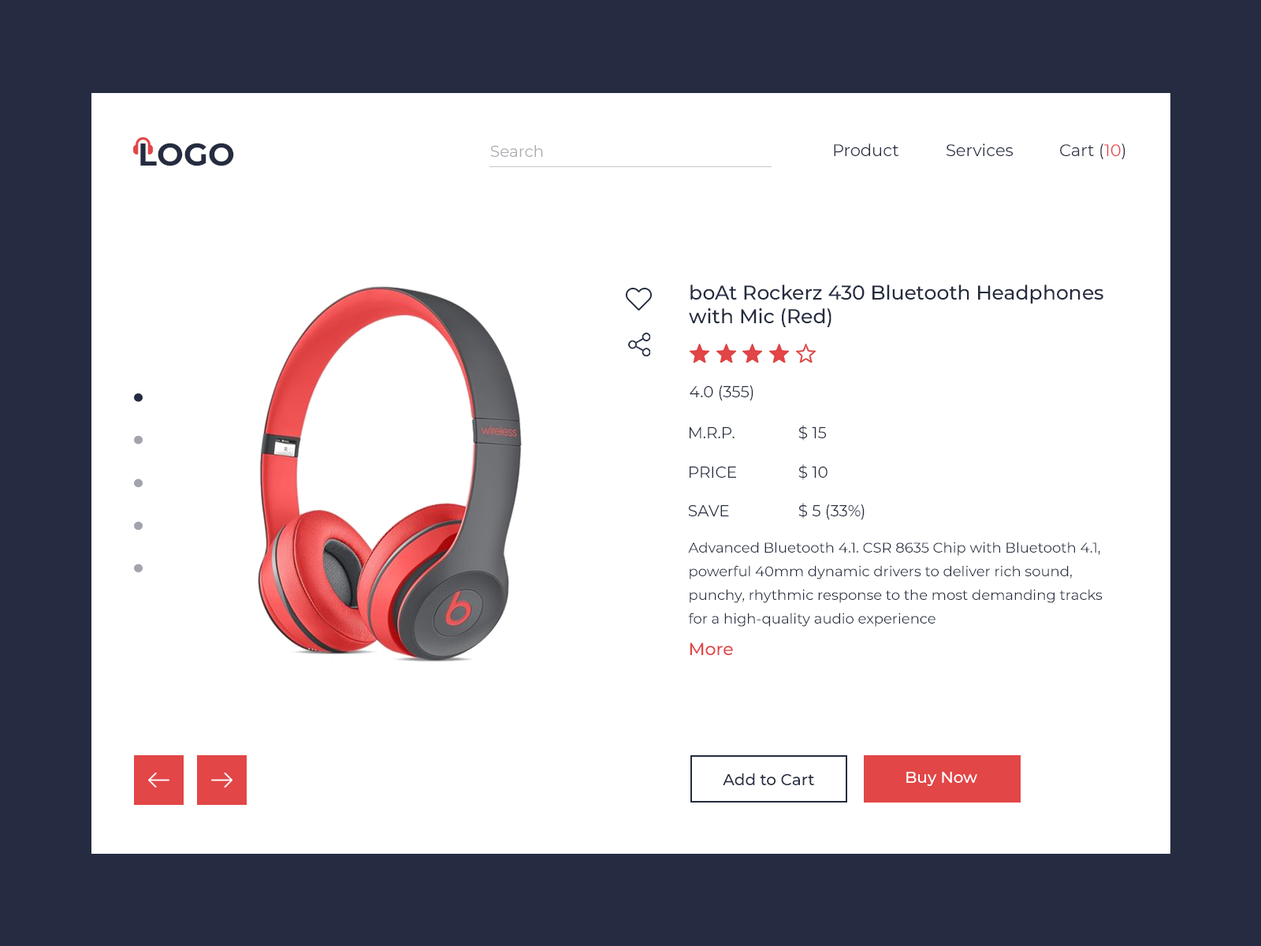
<style>
.page{position:relative;width:1261px;height:946px;background:#ffffff}
.page>*{position:absolute;margin:0}
.t1{font:31.5px "Montserrat-Bold";color:#252c41}
.t2{font:15.8px "Montserrat-Regular";color:#a9abb0}
.t3{font:16.5px "Montserrat-Regular";color:#252c41}
.t4{font:16.5px "Montserrat-Regular";color:#e24647}
.t5{font:19.7px "Montserrat-Medium";color:#252c41}
.t6{font:15.8px "Montserrat-Regular";color:#252c41}
.t7{font:14.2px/23.6px "Montserrat-Regular";color:#252c41}
.t8{font:17.3px/15.8px "Montserrat-Medium";color:#e24647}
.t9{font:15.8px "Montserrat-Medium";color:#252c41}
.t10{font:15.8px "Montserrat-Medium";color:#ffffff}
</style>
<div class="page">
<p class="t1" style="left:140px;top:143px;width:94px;height:23px">LOGO</p>
<p class="t2" style="left:490px;top:145px;width:53px;height:12px">Search</p>
<p class="t3" style="left:834px;top:143px;width:291px;height:16px">Product  Services  Cart (<span class="t4">10</span>)</p>
<p class="t5" style="left:689px;top:284px;width:414px;height:43px">boAt Rockerz 430 Bluetooth Headphones <br>with Mic (Red)</p>
<p class="t6" style="left:690px;top:385px;width:63px;height:15px">4.0 (355)</p>
<p class="t6" style="left:798px;top:425px;width:28px;height:16px">$ 15</p>
<p class="t6" style="left:690px;top:426px;width:44px;height:12px">M.R.P.</p>
<p class="t6" style="left:690px;top:466px;width:46px;height:12px">PRICE</p>
<p class="t6" style="left:798px;top:464px;width:29px;height:16px">$ 10</p>
<p class="t6" style="left:688px;top:504px;width:41px;height:12px">SAVE</p>
<p class="t6" style="left:798px;top:503px;width:67px;height:16px">$ 5 (33%)</p>
<p class="t7" style="left:688px;top:541px;width:415px;height:115px">Advanced Bluetooth 4.1. CSR 8635 Chip with Bluetooth 4.1, powerful 40mm dynamic drivers to deliver rich sound, punchy, rhythmic response to the most demanding tracks for a high-quality audio experience<br><br><span class="t8">More</span></p>
<p class="t9" style="left:723px;top:773px;width:91px;height:13px">Add to Cart</p>
<p class="t10" style="left:906px;top:772px;width:71px;height:14px">Buy Now</p>
</div>
